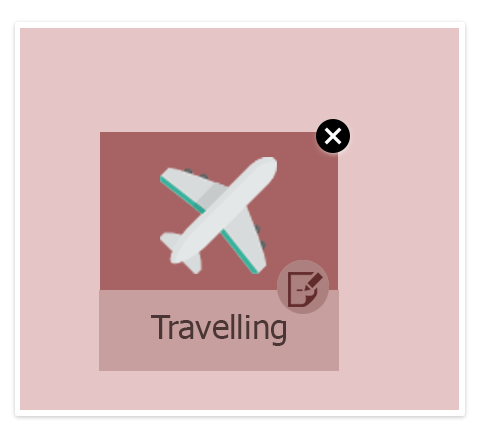
<style>
.page{position:relative;width:479px;height:421px;background:#e5c5c5}
.page>*{position:absolute;margin:0}
.t1{font:32.7px "Tahoma";color:#4b3636}
</style>
<div class="page">
<p class="t1" style="left:151px;top:314px;width:135px;height:32px">Travelling</p>
</div>
